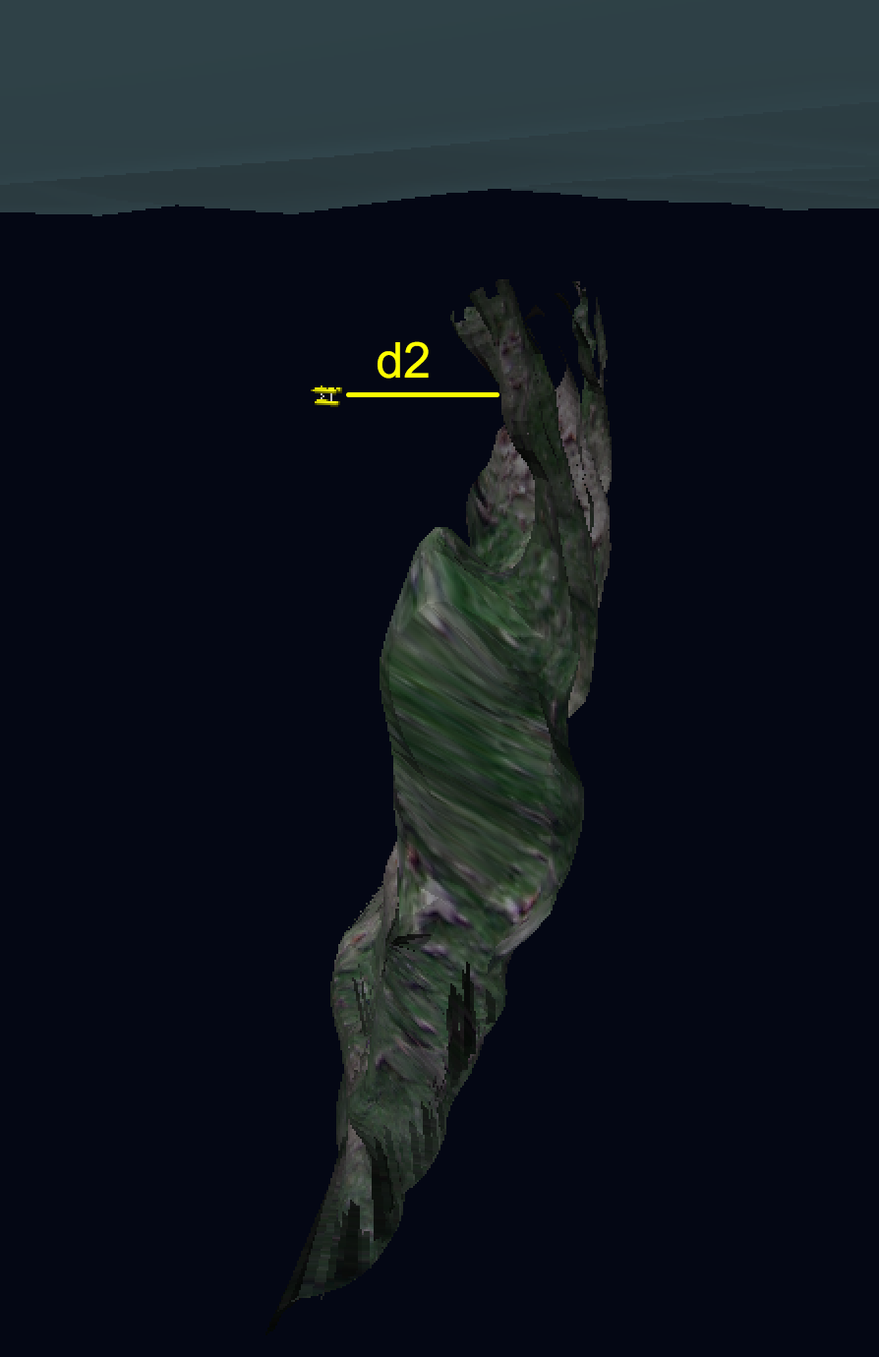
<style>
.page{position:relative;width:879px;height:1357px;background:#040714}
.page>*{position:absolute;margin:0}
.t1{font:49.2px "ArialMT";color:#ffff01}
</style>
<div class="page">
<p class="t1" style="left:378px;top:341px;width:51px;height:38px">d2</p>
</div>
